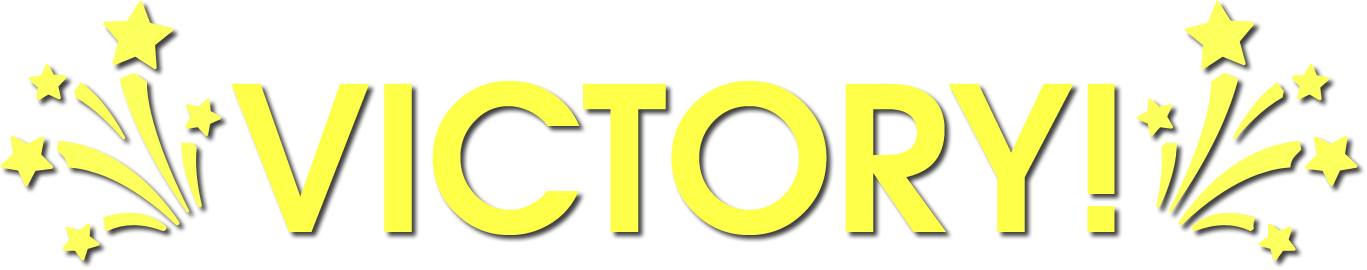
<style>
.page{position:relative;width:1367px;height:270px;background:#ffffff}
.page>*{position:absolute;margin:0}
.t1{font:200px "AvantGarde-Demi";color:#fdff48}
</style>
<div class="page">
<p class="t1" style="left:231px;top:80px;width:884px;height:155px">VICTORY!</p>
</div>
